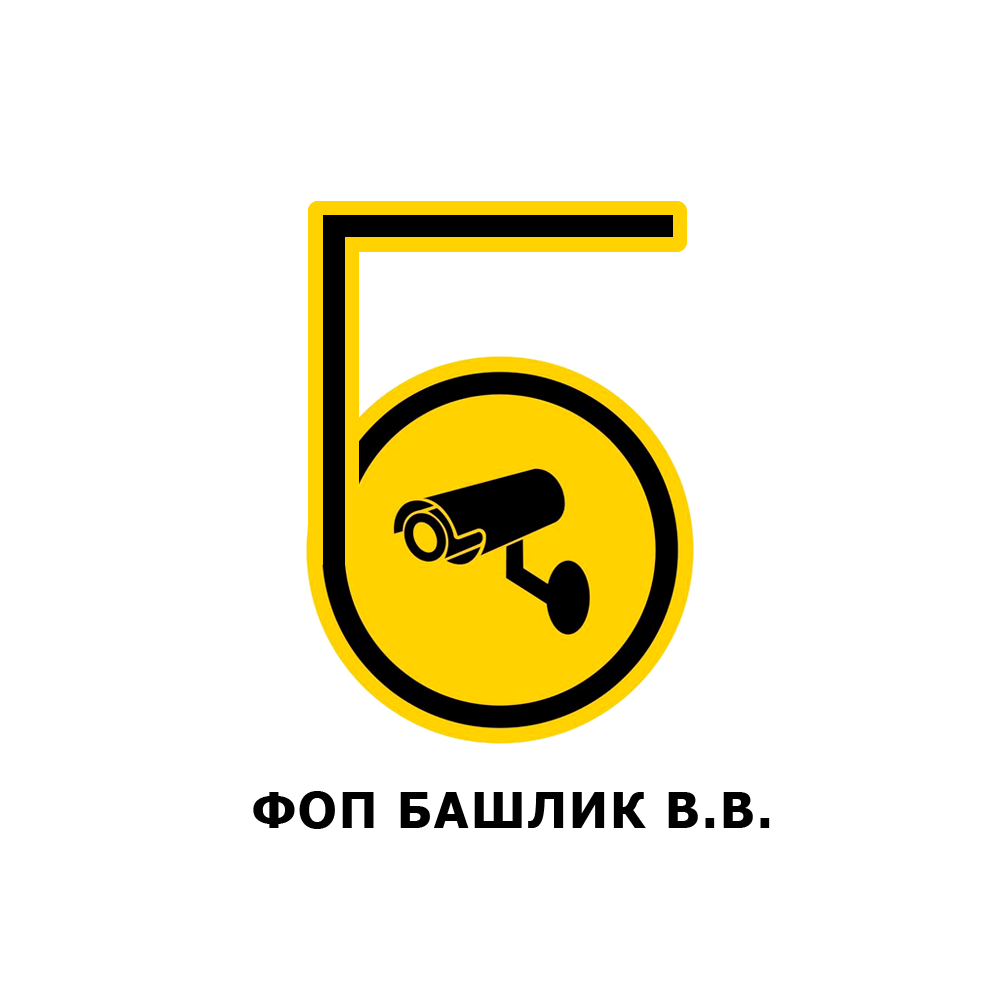
<style>
.page{position:relative;width:1000px;height:1000px;background:#ffffff}
.page>*{position:absolute;margin:0}
.t1{font:50px "Tahoma-Bold";letter-spacing:0.05em;color:#000000;text-transform:uppercase}
</style>
<div class="page">
<p class="t1" style="left:253px;top:791px;width:517px;height:38px">ФОП БАШЛИК В.В.</p>
</div>
